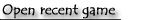
<style>
.page{position:relative;width:160px;height:20px;background:#ffffff}
.page>*{position:absolute;margin:0}
.t1{font:13.9px "TempusSansITC";color:#000000;font-weight:bold}
</style>
<div class="page">
<p class="t1" style="left:2px;top:4px;width:113px;height:15px">Open recent game</p>
</div>
